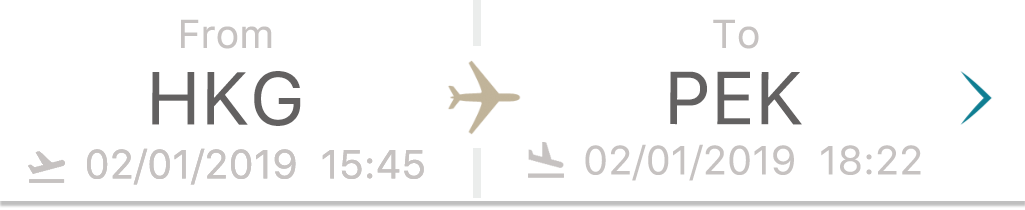
<style>
.page{position:relative;width:1025px;height:210px;background:#ffffff}
.page>*{position:absolute;margin:0}
.t1{font:40px "SFProText-Regular";color:#c6c2c1}
.t2{font:74.1px "SFProText-Regular";color:#636161}
</style>
<div class="page">
<p class="t1" style="left:181px;top:19px;width:91px;height:30px">From</p>
<p class="t1" style="left:713px;top:19px;width:46px;height:30px">To</p>
<p class="t2" style="left:152px;top:71px;width:149px;height:55px">HKG</p>
<p class="t2" style="left:670px;top:71px;width:132px;height:54px">PEK</p>
<p class="t1" style="left:87px;top:148px;width:337px;height:37px">02/01/2019  15:45</p>
<p class="t1" style="left:585px;top:144px;width:336px;height:37px">02/01/2019  18:22</p>
</div>
